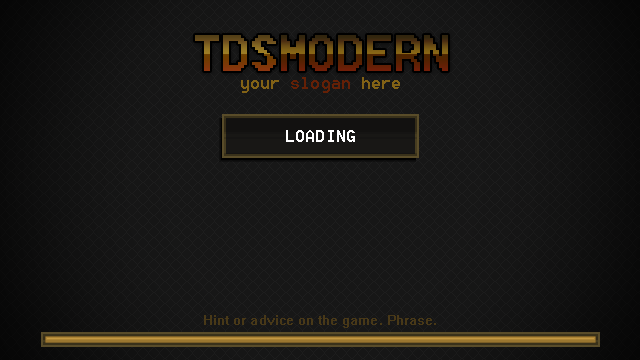
<style>
.page{position:relative;width:640px;height:360px;background:#171717}
.page>*{position:absolute;margin:0}
.t1{font:60px "Terminal";letter-spacing:0.01em}
.t2{font:12px "Terminal";letter-spacing:0.01em;color:#642006}
.t3{font:12px "Terminal";letter-spacing:0.01em;color:#826216}
.t4{font:30px "Terminal";letter-spacing:0.01em;color:#ffffff}
.t5{font:6px/60px "System";letter-spacing:0.01em;color:#483817}
</style>
<div class="page">
<p class="t1" style="left:195px;top:35px;width:253px;height:36px">TDSMODERN</p>
<p class="t2" style="left:241px;top:77px;width:159px;height:16px"><span class="t3">your </span>slogan<span class="t3"> here</span></p>
<p class="t4" style="left:286px;top:130px;width:69px;height:12px">LOADING</p>
<p class="t5" style="left:204px;top:315px;width:232px;height:13px;text-align:justify">Hint or advice on the game. Phrase.</p>
</div>
